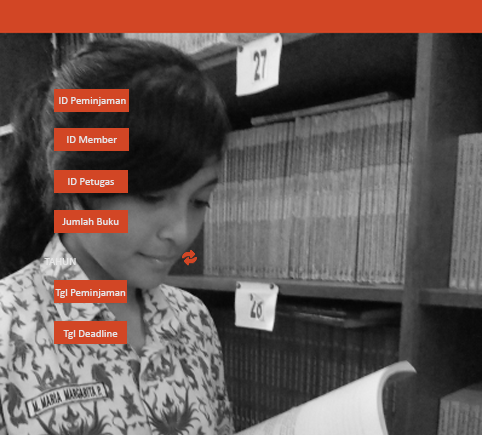
<style>
.page{position:relative;width:482px;height:435px}
.page>*{position:absolute;margin:0}
.t1{font:11px "Calibri";color:#e5e5e5}
</style>
<div class="page">
<p class="t1" style="left:59px;top:97px;width:67px;height:9px">ID Peminjaman</p>
<p class="t1" style="left:67px;top:136px;width:50px;height:7px">ID Member</p>
<p class="t1" style="left:68px;top:178px;width:46px;height:9px">ID Petugas</p>
<p class="t1" style="left:62px;top:218px;width:57px;height:7px">Jumlah Buku</p>
<p class="t1" style="left:44px;top:258px;width:32px;height:7px">TAHUN</p>
<p class="t1" style="left:55px;top:289px;width:71px;height:9px">Tgl Peminjaman</p>
<p class="t1" style="left:63px;top:330px;width:55px;height:9px">Tgl Deadline</p>
</div>
